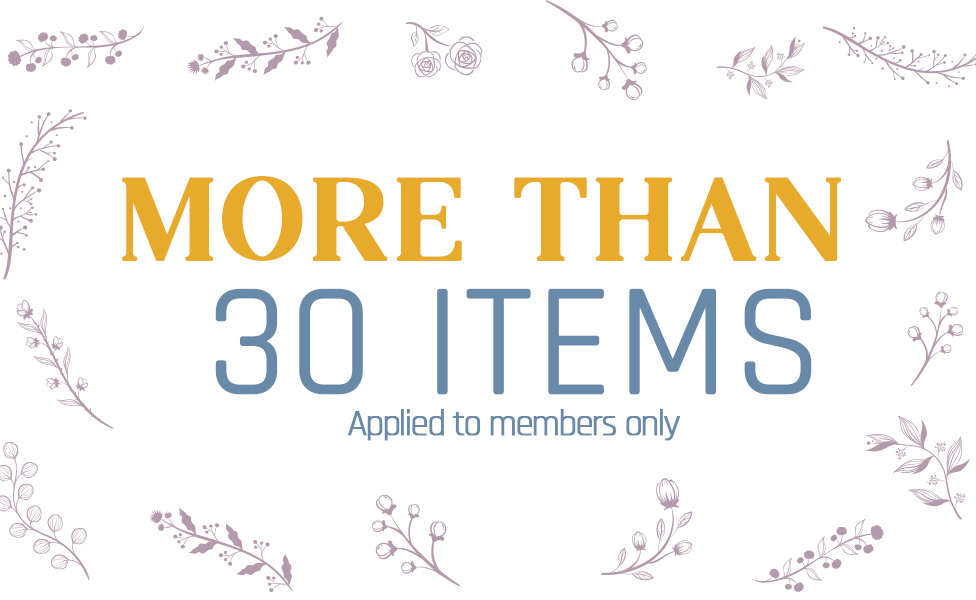
<style>
.page{position:relative;width:976px;height:600px;background:#ffffff}
.page>*{position:absolute;margin:0}
.t1{font:102px "Agne-Regular";color:#e7aa2a;font-weight:bold}
.t2{font:159.6px "Rajdhani-Regular";color:#6989a9;font-weight:bold}
.t3{font:37.1px "Rajdhani-Regular";letter-spacing:-0.075em;color:#6989a9;font-weight:bold}
</style>
<div class="page">
<p class="t1" style="left:122px;top:176px;width:720px;height:85px">MORE THAN</p>
<p class="t2" style="left:215px;top:288px;width:597px;height:107px">30 ITEMS</p>
<p class="t3" style="left:348px;top:409px;width:332px;height:32px">Applied to members only</p>
</div>
